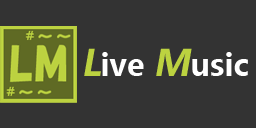
<style>
.page{position:relative;width:256px;height:128px;background:#333333}
.page>*{position:absolute;margin:0}
.t1{font:30px "MicrosoftYaHei-Bold";color:#ffffff}
.t2{font:36px "MicrosoftYaHei-Bold";color:#bcd240;font-style:italic}
</style>
<div class="page">
<p class="t1" style="left:84px;top:48px;width:164px;height:28px"><span class="t2">L</span>ive <span class="t2">M</span>usic</p>
</div>
